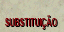
<style>
.page{position:relative;width:64px;height:32px;background:#c7c7ab}
.page>*{position:absolute;margin:0}
.t1{font:10.5px "Arial-BoldMT";letter-spacing:-0.04em;color:#85070e;scale:0.71 1}
</style>
<div class="page">
<p class="t1" style="left:5px;top:15px;width:52px;height:14px">SUBSTITUIÇÃO</p>
</div>
